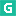
<style>
.page{position:relative;width:16px;height:16px;background:#1abc9c}
.page>*{position:absolute;margin:0}
.t1{font:12.5px "OpenSans-Extrabold";color:#ffffff}
</style>
<div class="page">
<p class="t1" style="left:4px;top:3px;width:8px;height:9px">G</p>
</div>
